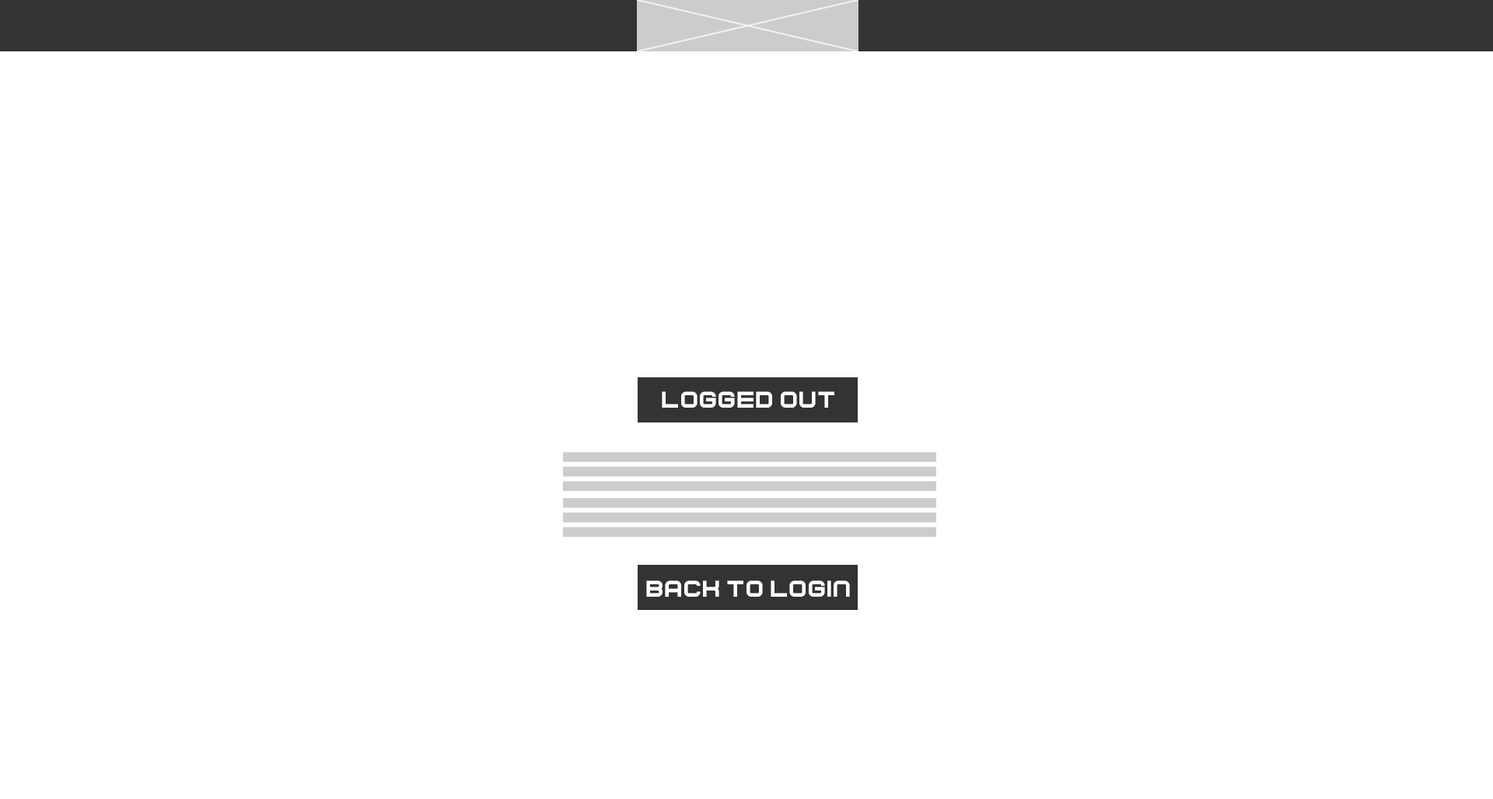
<style>
.page{position:relative;width:1493px;height:799px;background:#ffffff}
.page>*{position:absolute;margin:0}
.t1{font:23.3px "Curvert";color:#ffffff}
</style>
<div class="page">
<p class="t1" style="left:662px;top:391px;width:172px;height:16px">LOGGED OUT</p>
<p class="t1" style="left:646px;top:580px;width:204px;height:16px">BACK TO LOGIN</p>
</div>
